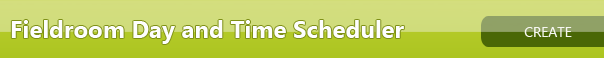
<style>
.page{position:relative;width:604px;height:58px}
.page>*{position:absolute;margin:0}
.t1{font:24px "SegoeUI-Bold";color:#fefefe}
.t2{font:14px "SegoeUI";color:#f6f7f1}
</style>
<div class="page">
<p class="t1" style="left:11px;top:20px;width:393px;height:24px">Fieldroom Day and Time Scheduler</p>
<p class="t2" style="left:524px;top:27px;width:48px;height:10px">CREATE</p>
</div>
